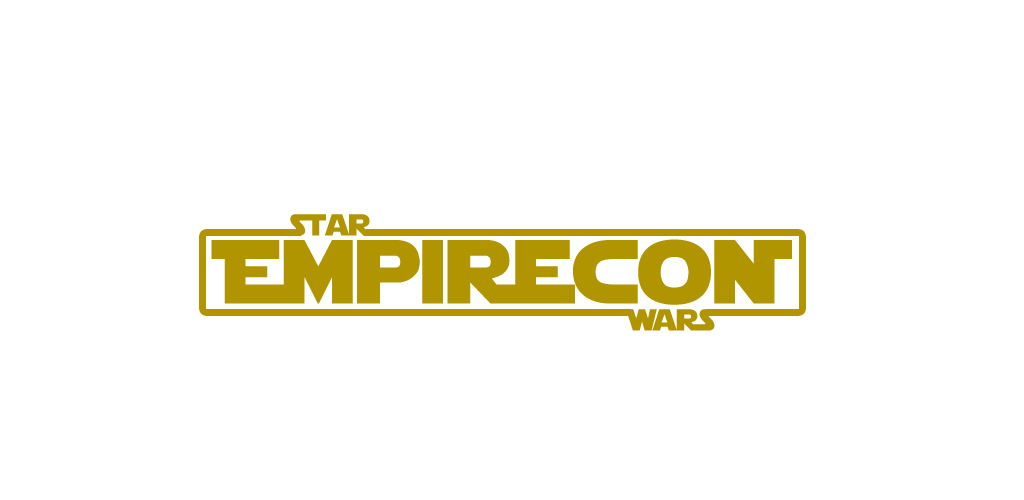
<style>
.page{position:relative;width:1024px;height:500px;background:#ffffff}
.page>*{position:absolute;margin:0}
.t1{font:30px "StarJedi";color:#b09500}
.t2{font:90px "StarJedi";color:#b09500}
</style>
<div class="page">
<p class="t1" style="left:282px;top:214px;width:90px;height:22px">Star</p>
<p class="t2" style="left:211px;top:239px;width:581px;height:66px">EmpirecoN</p>
<p class="t1" style="left:623px;top:309px;width:93px;height:22px">Wars</p>
</div>
